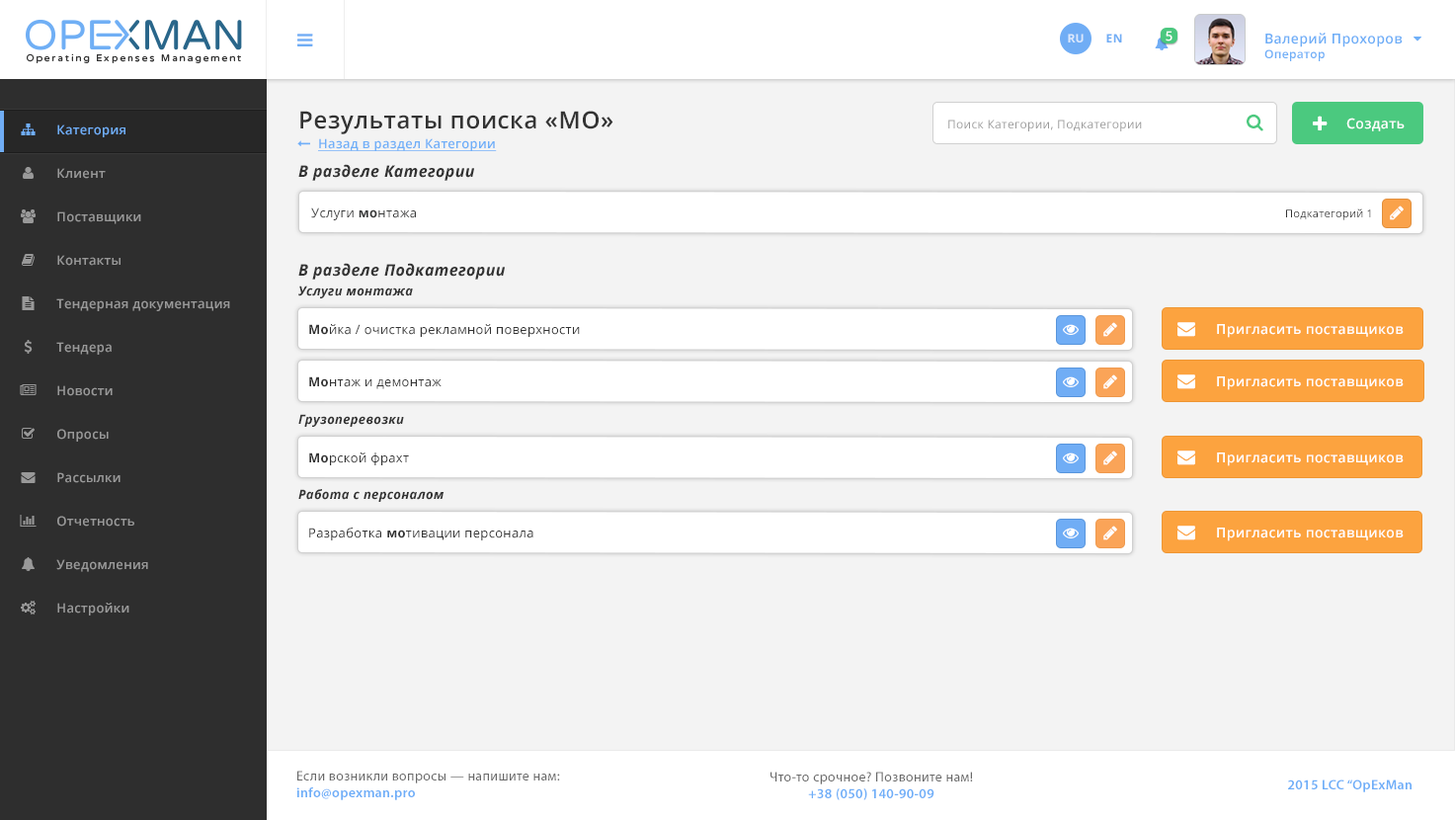
<style>
.page{position:relative;width:1455px;height:820px;background:#f3f3f3}
.page>*{position:absolute;margin:0}
.t1{font:11.9px "OpenSans-Bold";letter-spacing:0.025em;color:#dbe8fc;text-transform:uppercase}
.t2{font:11.9px "OpenSans-Bold";letter-spacing:0.025em;color:#70adf5;text-transform:uppercase}
.t3{font:12.8px "OpenSans-Semibold";letter-spacing:0.025em;color:#ffffff}
.t4{font:13.8px "OpenSans-Semibold";letter-spacing:0.025em;color:#6eaef7}
.t5{font:11.9px "OpenSans-Semibold";letter-spacing:0.025em;color:#6eaef7}
.t6{font:23.7px "OpenSans-Semibold";letter-spacing:0.025em;color:#333333}
.t7{font:12.8px "OpenSans-Semibold";letter-spacing:0.025em;color:#70adf5}
.t8{font:11.9px "OpenSans";letter-spacing:0.025em;color:#999999}
.t9{font:13.8px "OpenSans-Semibold";letter-spacing:0.025em;color:#ffffff}
.t10{font:12.8px "OpenSans-Semibold";letter-spacing:0.025em;color:#6faff8;text-decoration:underline}
.t11{font:12.8px "OpenSans-Semibold";letter-spacing:0.025em;color:#999999}
.t12{font:15.8px "OpenSans-BoldItalic";letter-spacing:0.025em;color:#333333}
.t13{font:12.8px "OpenSans";letter-spacing:0.025em;color:#373838}
.t14{font:12.8px "OpenSans-Bold";letter-spacing:0.025em;color:#373838}
.t15{font:10.9px "OpenSans";letter-spacing:0.025em;color:#333333}
.t16{font:12.8px "OpenSans-BoldItalic";letter-spacing:0.025em;color:#333333}
.t17{font:12.8px "OpenSans";letter-spacing:0.025em;color:#333333}
.t18{font:12.8px "OpenSans-Bold";letter-spacing:0.025em;color:#333333}
.t19{font:13.8px "MyriadPro-Regular";letter-spacing:0.025em;color:#696969}
.t20{font:13.8px "MyriadPro-Semibold";letter-spacing:0.025em;color:#6eaef8}
</style>
<div class="page">
<p class="t1" style="left:1068px;top:34px;width:15px;height:8px">Ru</p>
<p class="t2" style="left:1106px;top:34px;width:16px;height:8px">EN</p>
<p class="t3" style="left:1165px;top:31px;width:7px;height:10px">5</p>
<p class="t4" style="left:1264px;top:33px;width:138px;height:28px">Валерий Прохоров<br><span class="t5">Оператор</span></p>
<p class="t6" style="left:300px;top:111px;width:313px;height:23px">Результаты поиска «МО»</p>
<p class="t7" style="left:57px;top:124px;width:68px;height:13px">Категория</p>
<p class="t8" style="left:948px;top:119px;width:194px;height:12px">Поиск Категории, Подкатегории</p>
<p class="t9" style="left:1346px;top:118px;width:58px;height:13px">Создать</p>
<p class="t10" style="left:318px;top:138px;width:179px;height:13px">Назад в раздел Категории</p>
<p class="t11" style="left:57px;top:168px;width:49px;height:11px">Клиент</p>
<p class="t12" style="left:298px;top:164px;width:176px;height:17px">В разделе Категории</p>
<p class="t13" style="left:311px;top:207px;width:105px;height:13px">Услуги <span class="t14">мо</span>нтажа</p>
<p class="t15" style="left:1286px;top:208px;width:85px;height:12px">Подкатегорий 1</p>
<p class="t11" style="left:57px;top:211px;width:84px;height:13px">Поставщики</p>
<p class="t11" style="left:57px;top:255px;width:63px;height:11px">Контакты</p>
<p class="t12" style="left:298px;top:263px;width:207px;height:16px">В разделе Подкатегории</p>
<p class="t16" style="left:298px;top:285px;width:115px;height:13px">Услуги монтажа</p>
<p class="t11" style="left:56px;top:298px;width:174px;height:13px">Тендерная документация</p>
<p class="t17" style="left:309px;top:324px;width:271px;height:13px"><span class="t18">Мо</span>йка / очистка рекламной поверхности</p>
<p class="t9" style="left:1217px;top:324px;width:186px;height:14px">Пригласить поставщиков</p>
<p class="t11" style="left:56px;top:342px;width:56px;height:13px">Тендера</p>
<p class="t17" style="left:309px;top:376px;width:132px;height:13px"><span class="t18">Мо</span>нтаж и демонтаж</p>
<p class="t9" style="left:1217px;top:376px;width:186px;height:14px">Пригласить поставщиков</p>
<p class="t11" style="left:57px;top:385px;width:56px;height:11px">Новости</p>
<p class="t16" style="left:298px;top:414px;width:106px;height:13px">Грузоперевозки</p>
<p class="t11" style="left:57px;top:429px;width:52px;height:12px">Опросы</p>
<p class="t17" style="left:309px;top:452px;width:100px;height:13px"><span class="t18">Мо</span>рской фрахт</p>
<p class="t9" style="left:1217px;top:452px;width:186px;height:14px">Пригласить поставщиков</p>
<p class="t11" style="left:57px;top:472px;width:63px;height:11px">Рассылки</p>
<p class="t16" style="left:298px;top:489px;width:145px;height:13px">Работа с персоналом</p>
<p class="t11" style="left:57px;top:516px;width:77px;height:10px">Отчетность</p>
<p class="t17" style="left:309px;top:527px;width:224px;height:13px">Разработка <span class="t18">мо</span>тивации персонала</p>
<p class="t9" style="left:1217px;top:527px;width:186px;height:14px">Пригласить поставщиков</p>
<p class="t11" style="left:56px;top:559px;width:92px;height:13px">Уведомления</p>
<p class="t11" style="left:57px;top:602px;width:72px;height:13px">Настройки</p>
<p class="t19" style="left:296px;top:770px;width:264px;height:30px">Если возникли вопросы — напишите нам:<br><span class="t20">info@opexman.pro</span></p>
<p class="t19" style="left:770px;top:771px;width:203px;height:29px;text-align:center">Что-то срочное? Позвоните нам!<br><span class="t20">+38 (050) 140-90-09</span></p>
<p class="t20" style="left:1288px;top:779px;width:123px;height:13px">2015 LCC “OpExMan</p>
</div>
